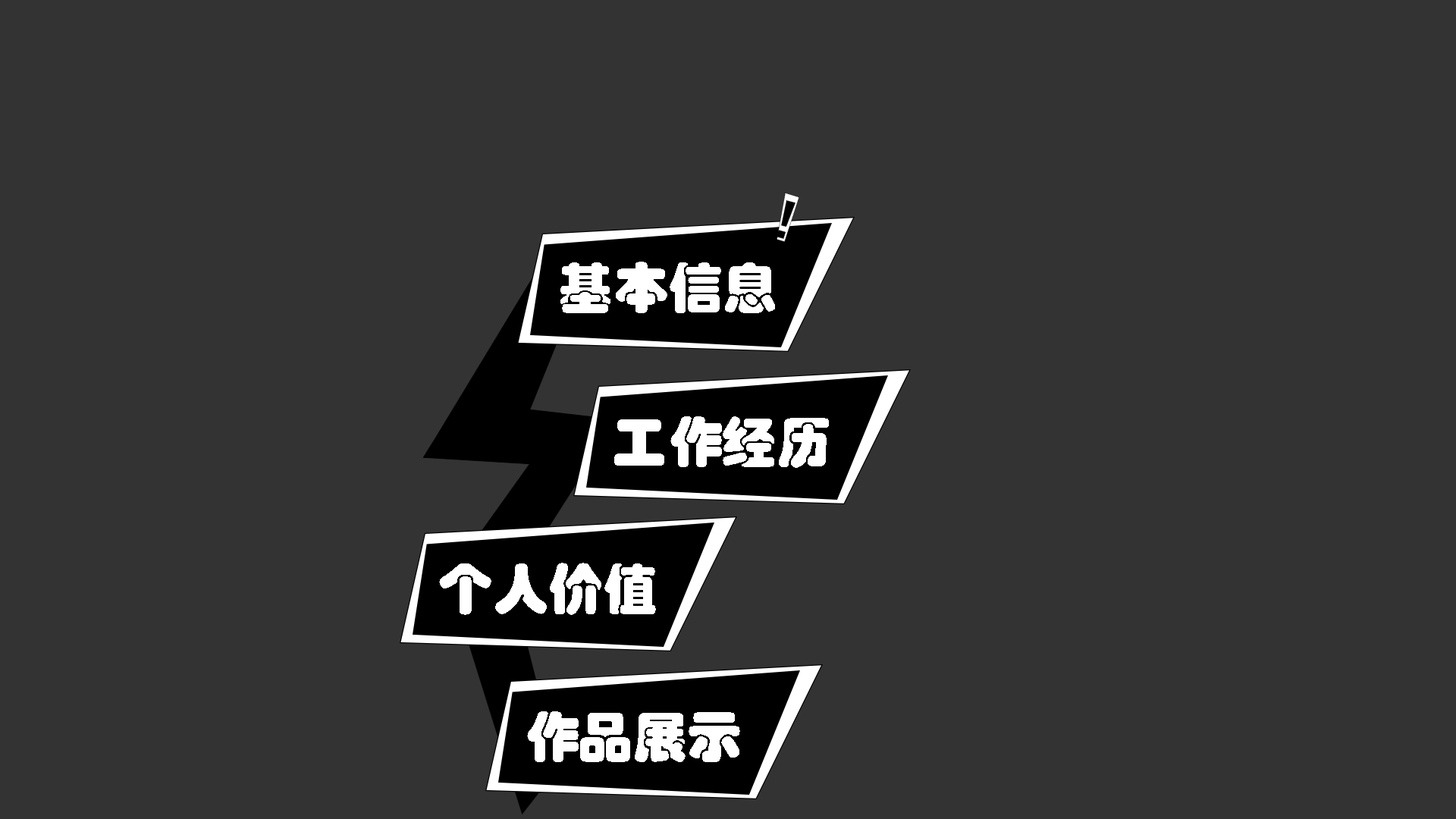
<style>
.page{position:relative;width:1456px;height:819px;background:#333333}
.page>*{position:absolute;margin:0}
.t1{font:54.6px "STHupo";color:#ffffff}
</style>
<div class="page">
<p class="t1" style="left:560px;top:262px;width:215px;height:51px">基本信息</p>
<p class="t1" style="left:614px;top:416px;width:215px;height:52px">工作经历</p>
<p class="t1" style="left:439px;top:563px;width:217px;height:52px">个人价值</p>
<p class="t1" style="left:527px;top:711px;width:213px;height:51px">作品展示</p>
</div>
